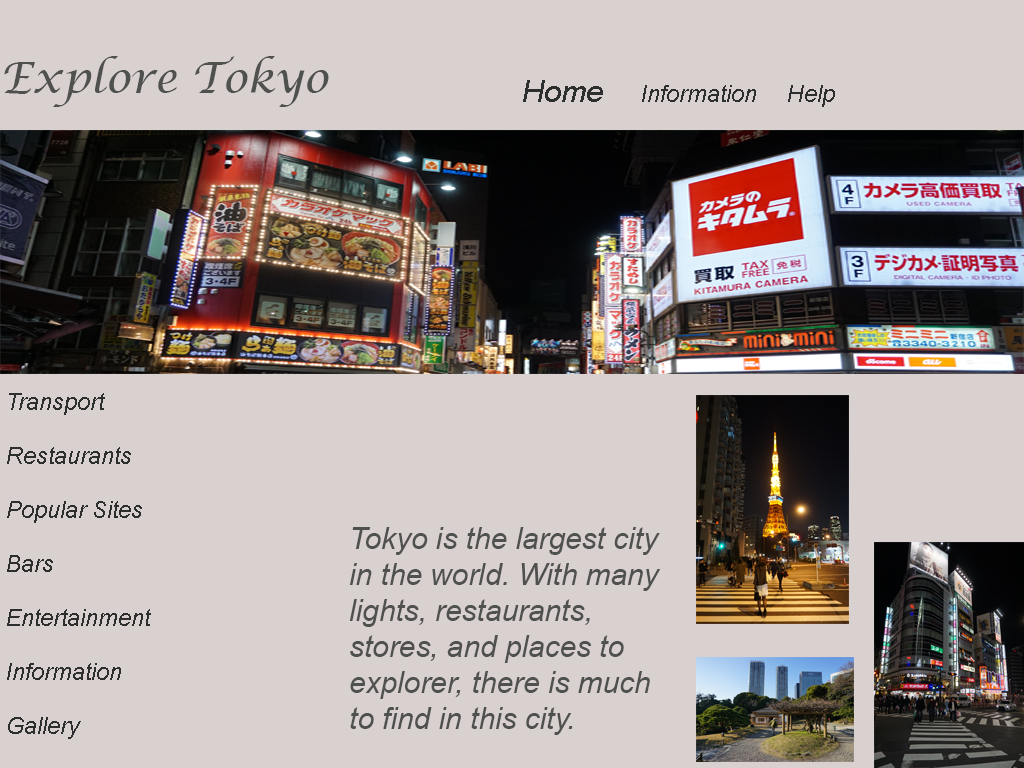
<style>
.page{position:relative;width:1024px;height:768px;background:#d9d0d0}
.page>*{position:absolute;margin:0}
.t1{font:42.8px "LucidaCalligraphy-Italic";color:#4e514e}
.t2{font:22.5px "Arial-ItalicMT";color:#2d2e2e}
.t3{font:30px "Arial-ItalicMT";color:#2d2e2e}
.t4{font:30px "Arial-ItalicMT";color:#4e514e}
</style>
<div class="page">
<p class="t1" style="left:4px;top:56px;width:325px;height:51px">Explore Tokyo</p>
<p class="t2" style="left:523px;top:80px;width:312px;height:27px"><span class="t3">Home </span>     Information     Help</p>
<p class="t2" style="left:7px;top:393px;width:144px;height:346px">Transport<br><br> Restaurants<br><br> Popular Sites<br><br> Bars<br><br> Entertainment<br><br> Information<br><br> Gallery</p>
<p class="t4" style="left:349px;top:527px;width:312px;height:208px">Tokyo is the largest city in the world. With many lights, restaurants, stores, and places to   explorer, there is much to find in this city.</p>
</div>
